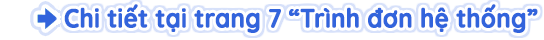
<style>
.page{position:relative;width:544px;height:40px;background:#ffffff}
.page>*{position:absolute;margin:0}
.t1{font:26.4px "Quicksand-Bold";letter-spacing:-0.01em;color:#3264dc;font-weight:bold;scale:0.91 1}
</style>
<div class="page">
<p class="t1" style="left:64px;top:4px;width:474px;height:29px">Chi tiết tại trang 7 “Trình đơn hệ thống”</p>
</div>
